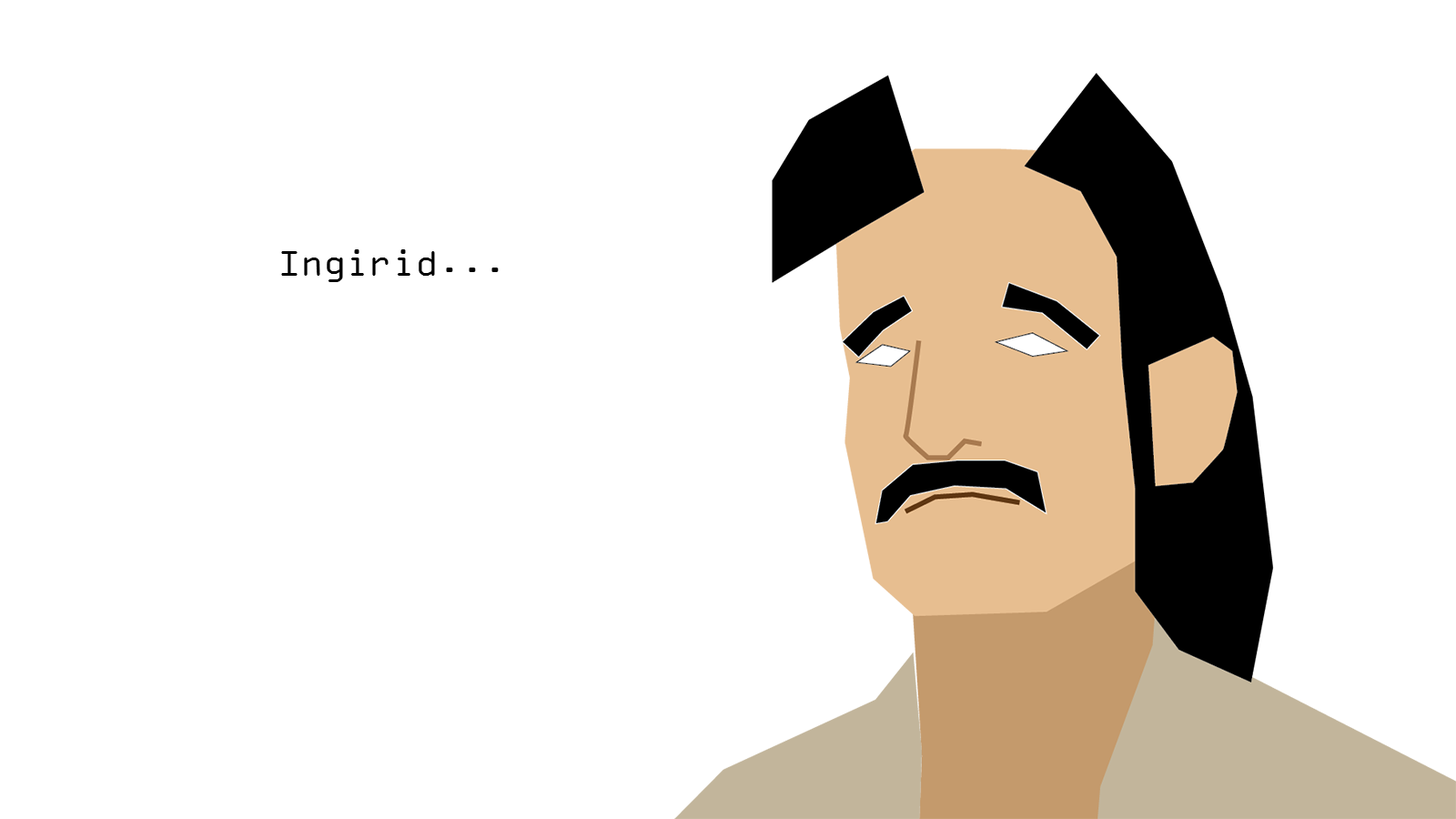
<style>
.page{position:relative;width:1456px;height:819px;background:#ffffff}
.page>*{position:absolute;margin:0}
.t1{font:37.9px "OCRAExtended";color:#000000}
</style>
<div class="page">
<p class="t1" style="left:281px;top:249px;width:218px;height:33px">Ingirid...</p>
</div>
